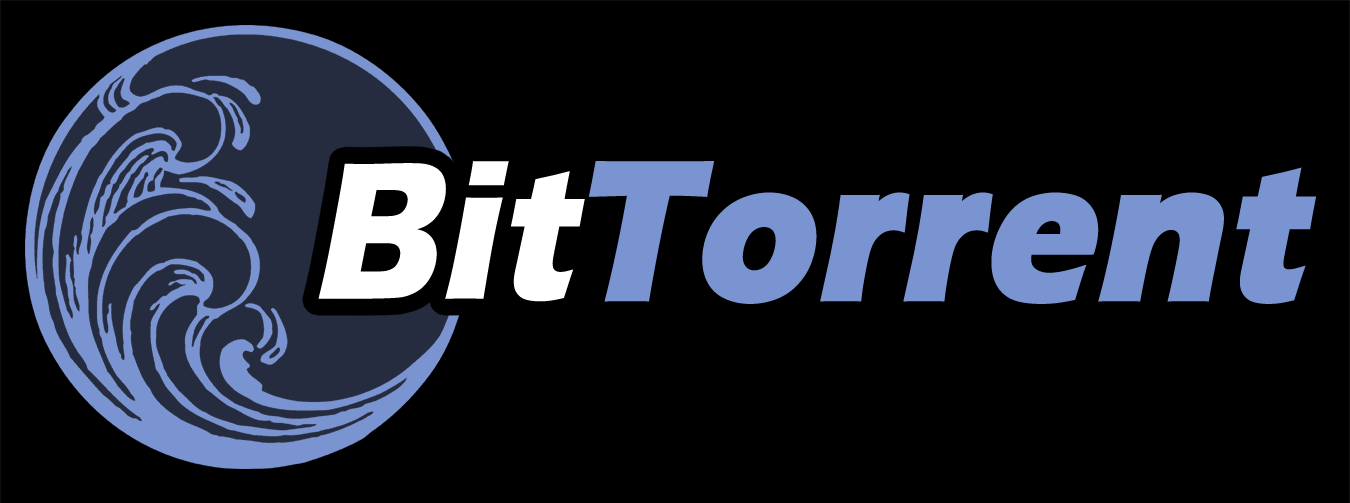
<style>
.page{position:relative;width:1350px;height:503px;background:#000000}
.page>*{position:absolute;margin:0}
.t1{font:202.4px "ErasITC-Bold";color:#7a93d1;font-weight:bold;font-style:italic;scale:0.9 1}
.t2{font:202.4px "ErasITC-Bold";color:#ffffff;font-style:italic;scale:0.9 1}
</style>
<div class="page">
<p class="t1" style="left:318px;top:161px;width:998px;height:143px"><span class="t2">Bit</span>Torrent</p>
</div>
